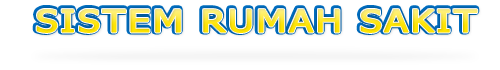
<style>
.page{position:relative;width:500px;height:70px;background:#ffffff}
.page>*{position:absolute;margin:0}
.t1{font:30.3px "Tahoma";letter-spacing:0.05em;font-weight:bold;scale:1.28 1}
</style>
<div class="page">
<p class="t1" style="left:35px;top:8px;width:442px;height:24px">SISTEM RUMAH SAKIT</p>
<p class="t1" style="left:36px;top:9px;width:442px;height:24px">SISTEM RUMAH SAKIT</p>
</div>
